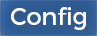
<style>
.page{position:relative;width:97px;height:36px;background:#2f5a90}
.page>*{position:absolute;margin:0}
.t1{font:24px "Montserrat-Regular";color:#ffffff}
</style>
<div class="page">
<p class="t1" style="left:11px;top:7px;width:75px;height:23px">Config</p>
</div>
